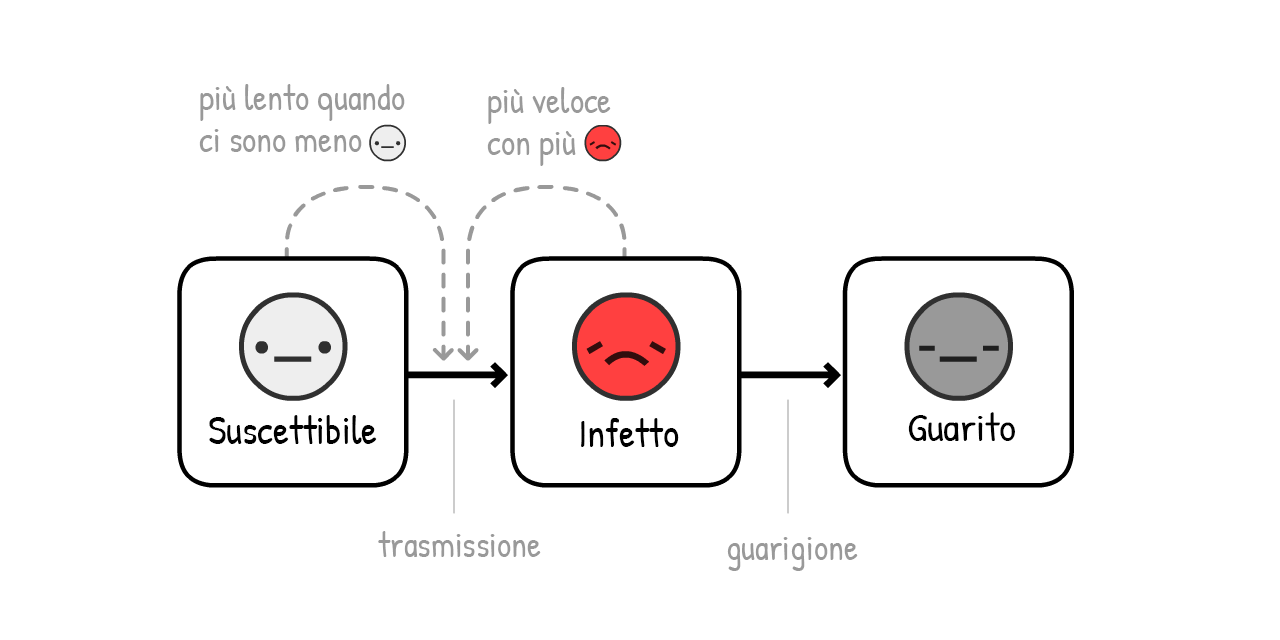
<style>
.page{position:relative;width:1280px;height:640px;background:#ffffff}
.page>*{position:absolute;margin:0}
.t1{font:35px "PatrickHand-Regular";color:#999999}
.t2{font:39.2px "PatrickHand-Regular";color:#000000;scale:1.06 1}
.t3{font:40px "PatrickHand-Regular";color:#000000}
</style>
<div class="page">
<p class="t1" style="left:199px;top:84px;width:206px;height:68px">più lento quando<br>ci sono meno</p>
<p class="t1" style="left:487px;top:87px;width:124px;height:79px">più veloce<br>con più</p>
<p class="t2" style="left:908px;top:412px;width:107px;height:29px">Guarito</p>
<p class="t3" style="left:209px;top:415px;width:168px;height:29px">Suscettibile</p>
<p class="t3" style="left:581px;top:418px;width:98px;height:29px">Infetto</p>
<p class="t1" style="left:378px;top:531px;width:163px;height:26px">trasmissione</p>
<p class="t1" style="left:727px;top:537px;width:131px;height:34px">guarigione</p>
</div>
